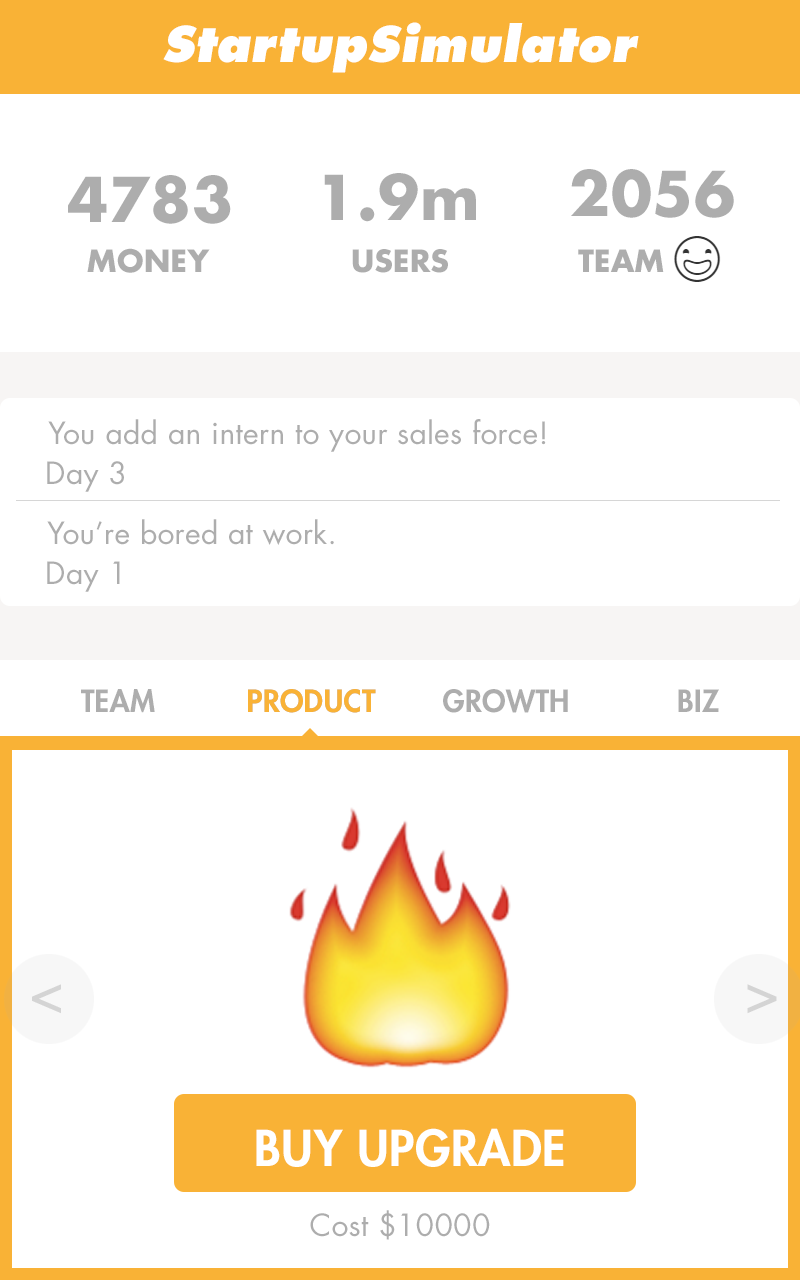
<style>
.page{position:relative;width:800px;height:1280px;background:#ffffff}
.page>*{position:absolute;margin:0}
.t1{font:48px "FuturaStd-ExtraBoldOblique";letter-spacing:0.01em;color:#ffffff}
.t2{font:60px "FuturaStd-Bold";letter-spacing:0.01em;color:#adadad}
.t3{font:30px "FuturaStd-Bold";letter-spacing:0.01em;color:#adadad}
.t4{font:30px "FuturaStd-Book";letter-spacing:0.01em;color:#adadad}
.t5{font:30px "FuturaStd-Heavy";letter-spacing:0.01em;color:#adadad}
.t6{font:30px "FuturaStd-Heavy";letter-spacing:0.01em;color:#f9b236}
.t7{font:60px "FuturaStd-Book";letter-spacing:0.01em;color:#d4d4d4}
.t8{font:48px "FuturaStd-Heavy";letter-spacing:0.01em;color:#ffffff}
</style>
<div class="page">
<p class="t1" style="left:163px;top:22px;width:476px;height:51px">StartupSimulator</p>
<p class="t2" style="left:324px;top:173px;width:152px;height:49px">1.9m</p>
<p class="t2" style="left:571px;top:169px;width:163px;height:49px">2056</p>
<p class="t2" style="left:68px;top:175px;width:163px;height:49px">4783</p>
<p class="t3" style="left:87px;top:248px;width:123px;height:25px">MONEY</p>
<p class="t3" style="left:352px;top:249px;width:96px;height:24px">USERS</p>
<p class="t3" style="left:578px;top:249px;width:86px;height:23px">TEAM</p>
<p class="t4" style="left:48px;top:419px;width:498px;height:33px">You add an intern to your sales force!</p>
<p class="t4" style="left:47px;top:461px;width:77px;height:31px">Day 3</p>
<p class="t4" style="left:47px;top:519px;width:287px;height:26px">You’re bored at work.</p>
<p class="t4" style="left:47px;top:561px;width:73px;height:31px">Day 1</p>
<p class="t5" style="left:81px;top:689px;width:74px;height:24px">TEAM</p>
<p class="t6" style="left:248px;top:689px;width:128px;height:24px">PRODUCT</p>
<p class="t6" style="left:248px;top:689px;width:128px;height:24px">PRODUCT</p>
<p class="t5" style="left:443px;top:689px;width:125px;height:24px">GROWTH</p>
<p class="t5" style="left:678px;top:689px;width:41px;height:23px">BIZ</p>
<p class="t7" style="left:32px;top:984px;width:29px;height:30px">&lt;</p>
<p class="t7" style="left:747px;top:984px;width:30px;height:30px;rotate:180deg">&lt;</p>
<p class="t8" style="left:256px;top:1128px;width:308px;height:39px">BUY UPGRADE</p>
<p class="t4" style="left:310px;top:1210px;width:180px;height:30px">Cost $10000</p>
</div>
